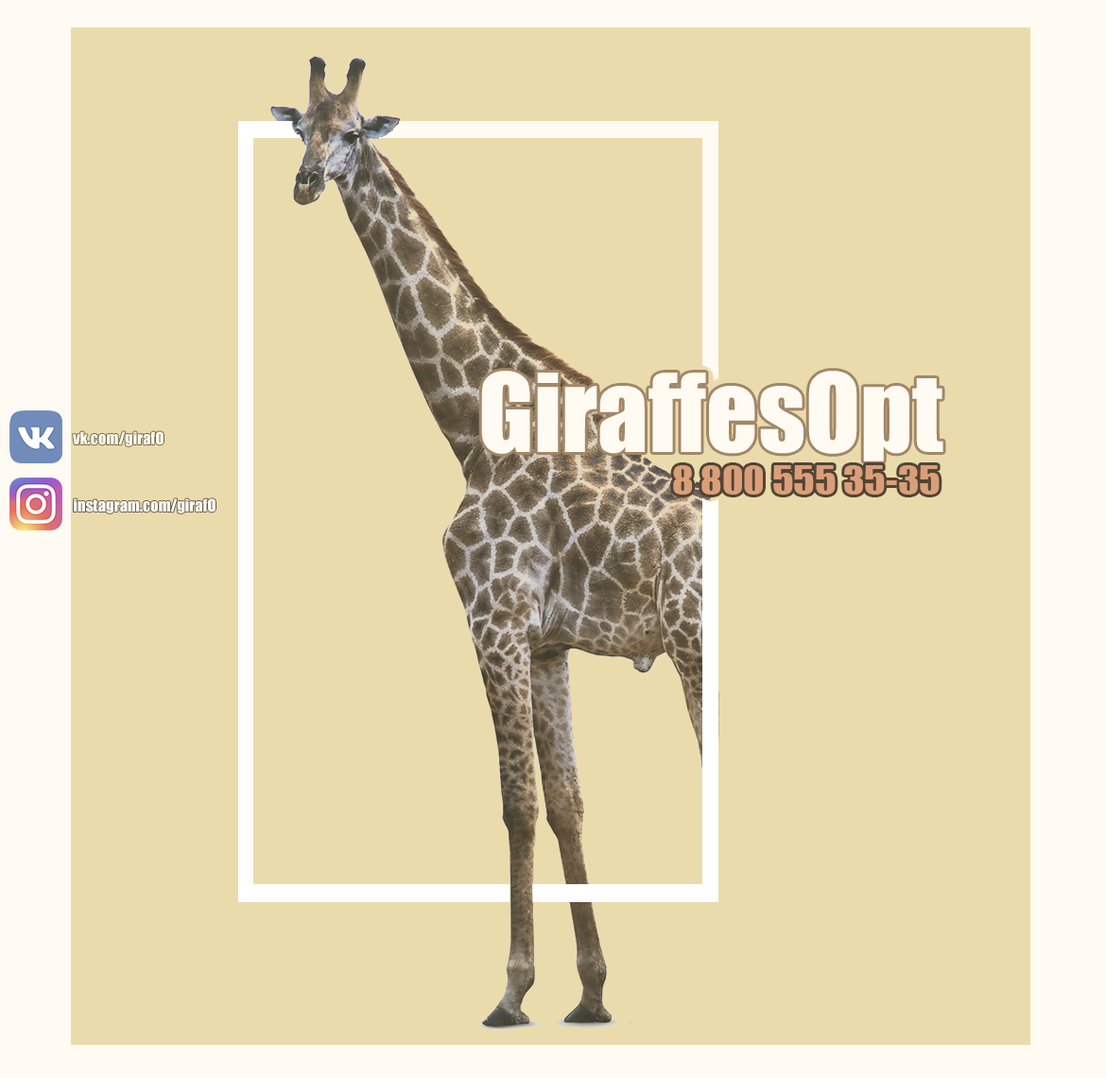
<style>
.page{position:relative;width:1106px;height:1078px;background:#eadbac}
.page>*{position:absolute;margin:0}
.t1{font:100.6px "Impact";color:#fffbf2}
.t2{font:15.8px "Impact";color:#fffbf2}
.t3{font:36.7px "Impact";color:#d99f79;scale:1.09 1}
</style>
<div class="page">
<p class="t1" style="left:481px;top:371px;width:463px;height:90px">GiraffesOpt</p>
<p class="t2" style="left:73px;top:431px;width:91px;height:15px">vk.com/girafO</p>
<p class="t3" style="left:673px;top:465px;width:267px;height:30px">8 800 555 35-35</p>
<p class="t2" style="left:74px;top:498px;width:142px;height:15px">instagram.com/girafO</p>
</div>
